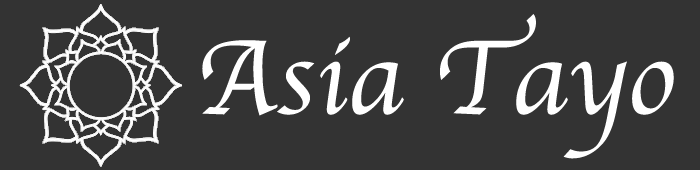
<style>
.page{position:relative;width:700px;height:170px;background:#333333}
.page>*{position:absolute;margin:0}
.t1{font:110px "Apple-Chancery";color:#ffffff}
</style>
<div class="page">
<p class="t1" style="left:202px;top:14px;width:472px;height:145px">Asia Tayo</p>
</div>
